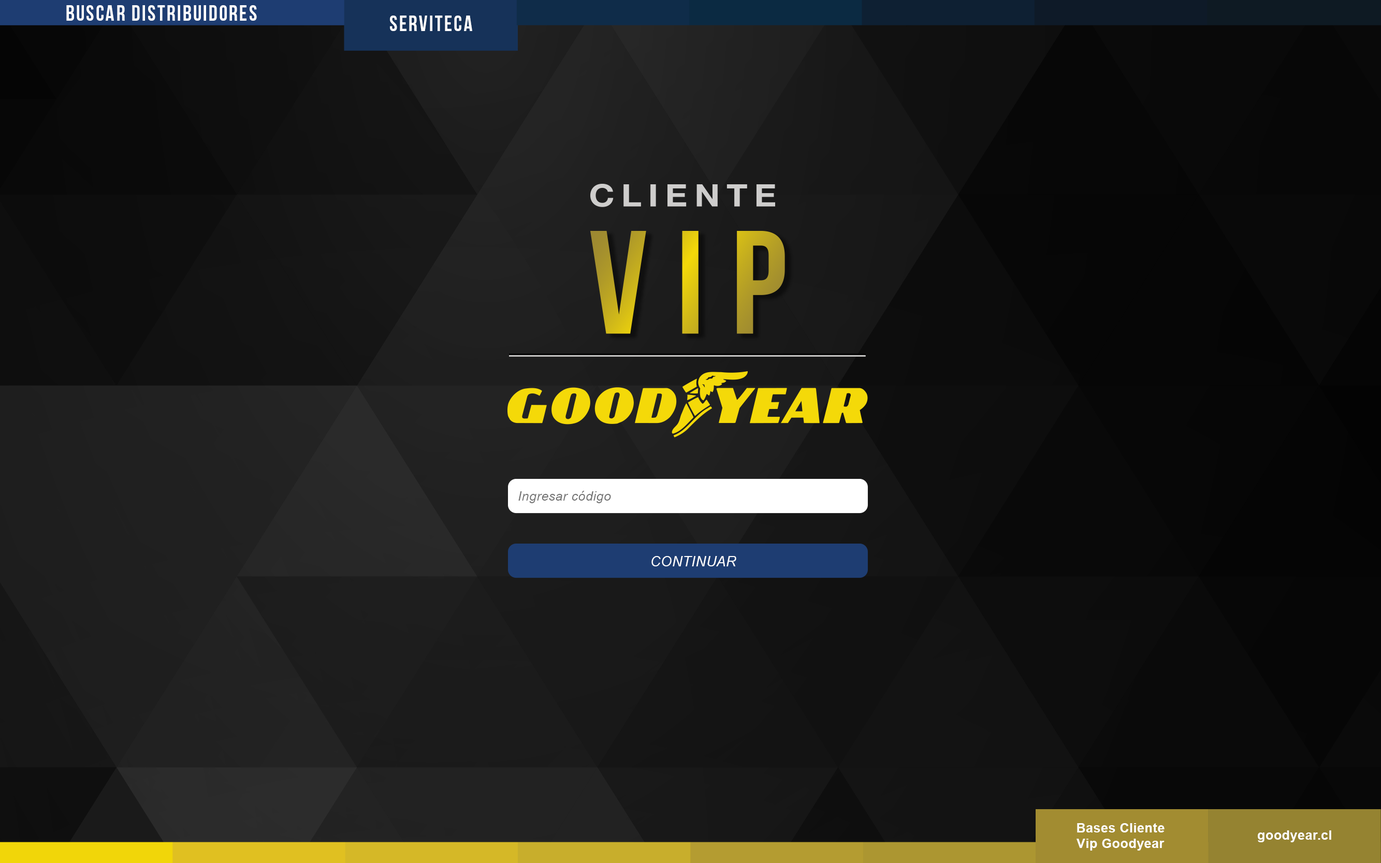
<style>
.page{position:relative;width:1381px;height:863px}
.page>*{position:absolute;margin:0}
.t1{font:21.6px "BebasNeue";letter-spacing:0.075em;color:#ffffff}
.t2{font:12.9px "Arial-ItalicMT";letter-spacing:0.025em;color:#737373}
.t3{font:14px "Arial-ItalicMT";letter-spacing:0.025em;color:#ffffff;text-transform:uppercase}
.t4{font:12.9px "Arial-BoldMT";letter-spacing:0.025em;color:#ffffff}
</style>
<div class="page">
<p class="t1" style="left:66px;top:5px;width:191px;height:16px">BUSCAR DIStribuidores</p>
<p class="t1" style="left:390px;top:16px;width:82px;height:15px">SERVITECA</p>
<p class="t2" style="left:518px;top:491px;width:93px;height:12px">Ingresar código</p>
<p class="t3" style="left:652px;top:556px;width:84px;height:11px">CONTINUAR</p>
<p class="t4" style="left:1077px;top:823px;width:88px;height:28px;text-align:center">Bases Cliente<br>Vip Goodyear</p>
<p class="t4" style="left:1258px;top:831px;width:73px;height:12px">goodyear.cl</p>
</div>
